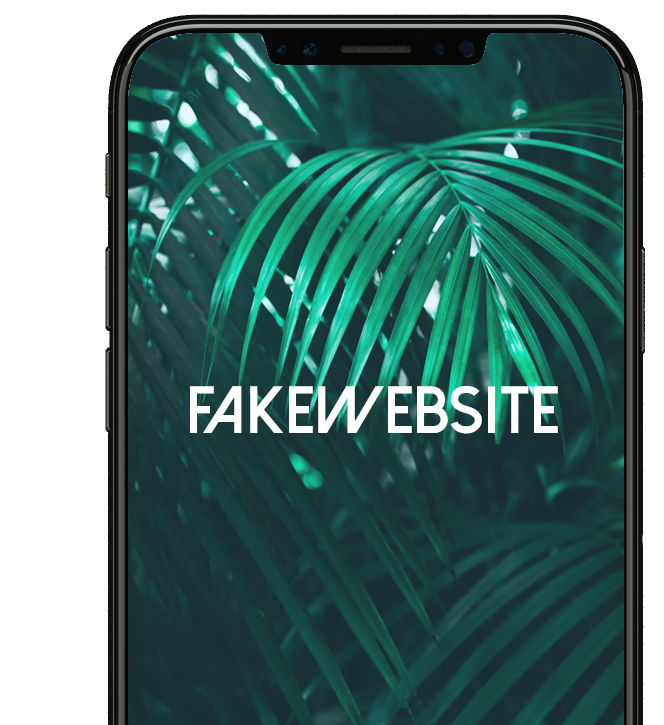
<style>
.page{position:relative;width:664px;height:725px;background:#ffffff}
.page>*{position:absolute;margin:0}
.t1{font:66.7px "DolceVitaHeavy-Bold";color:#ffffff}
</style>
<div class="page">
<p class="t1" style="left:190px;top:386px;width:368px;height:48px">FAKEWEBSITE</p>
</div>
